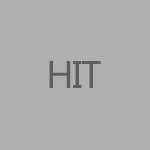
<style>
.page{position:relative;width:150px;height:150px;background:#afafaf}
.page>*{position:absolute;margin:0}
.t1{font:35.8px "MicrosoftYaHeiUI";letter-spacing:-0.05em;color:#5e5e5e}
</style>
<div class="page">
<p class="t1" style="left:49px;top:61px;width:52px;height:27px">HIT</p>
</div>
